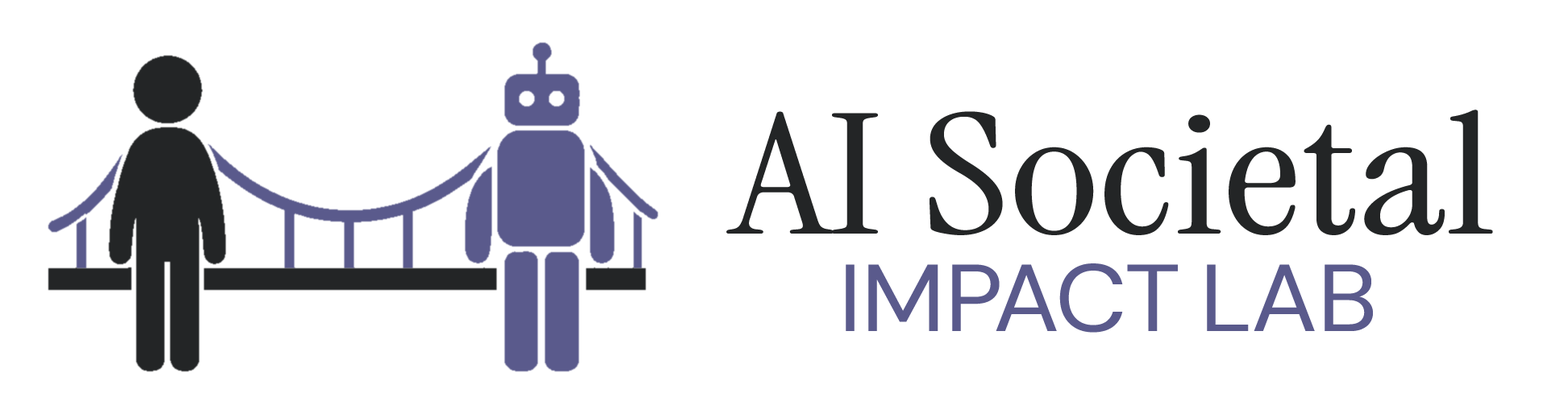
<style>
.page{position:relative;width:1568px;height:414px;background:#ffffff}
.page>*{position:absolute;margin:0}
.t1{font:167.3px "InstrumentSerif-Regular";letter-spacing:0.005em;color:#232526;scale:1.3 1}
.t2{font:94.9px "DMSans9pt-Regular";letter-spacing:-0.005em;color:#5a5a8c;scale:1.05 1}
</style>
<div class="page">
<p class="t1" style="left:726px;top:110px;width:767px;height:125px">AI Societal</p>
<p class="t2" style="left:846px;top:264px;width:527px;height:69px">IMPACT LAB</p>
</div>
